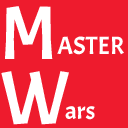
<style>
.page{position:relative;width:128px;height:128px;background:#ee1b2d}
.page>*{position:absolute;margin:0}
.t1{font:76px/65px "Acme-Regular";color:#ffffff}
.t2{font:25px "Acme-Regular";color:#ffffff}
</style>
<div class="page">
<p class="t1" style="left:1px;top:6px;width:68px;height:119px">M<br>W</p>
<p class="t2" style="left:57px;top:36px;width:67px;height:19px">ASTER</p>
<p class="t2" style="left:65px;top:106px;width:30px;height:14px">ars</p>
</div>
